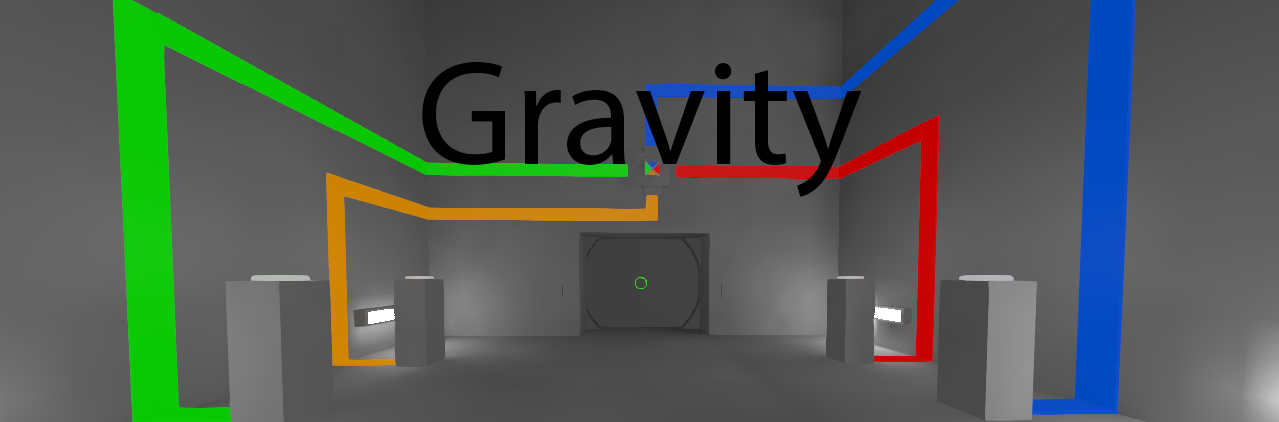
<style>
.page{position:relative;width:1279px;height:422px}
.page>*{position:absolute;margin:0}
.t1{font:150px "MyriadPro-Regular";color:#000000}
</style>
<div class="page">
<p class="t1" style="left:422px;top:61px;width:440px;height:136px">Gravity</p>
</div>
